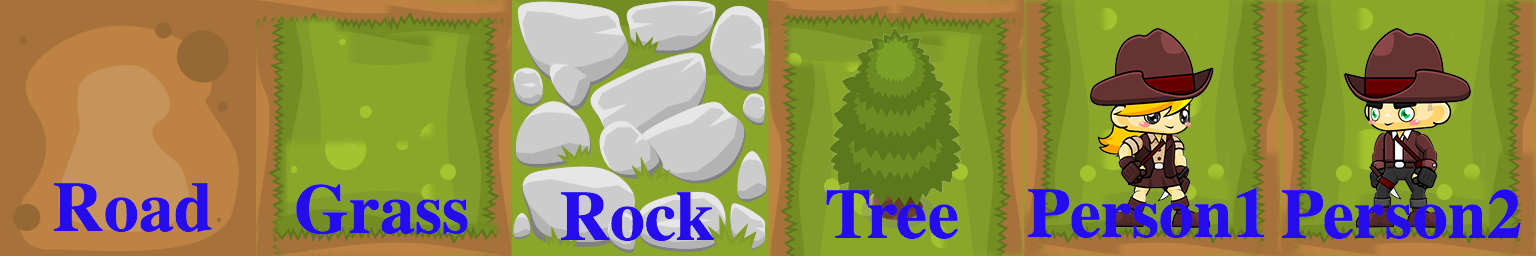
<style>
.page{position:relative;width:1536px;height:256px}
.page>*{position:absolute;margin:0}
.t1{font:70px "Times-Bold";color:#260ced}
</style>
<div class="page">
<p class="t1" style="left:53px;top:183px;width:159px;height:49px">Road</p>
<p class="t1" style="left:296px;top:184px;width:172px;height:51px">Grass</p>
<p class="t1" style="left:560px;top:192px;width:154px;height:49px">Rock</p>
<p class="t1" style="left:826px;top:190px;width:132px;height:49px">Tree</p>
<p class="t1" style="left:1027px;top:188px;width:238px;height:50px">Person1</p>
<p class="t1" style="left:1281px;top:189px;width:240px;height:50px">Person2</p>
</div>
